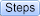
<style>
.page{position:relative;width:40px;height:16px}
.page>*{position:absolute;margin:0}
.t1{font:12px "ArialMT";color:#000000;scale:0.97 1}
</style>
<div class="page">
<p class="t1" style="left:5px;top:2px;width:30px;height:13px">Steps</p>
</div>
